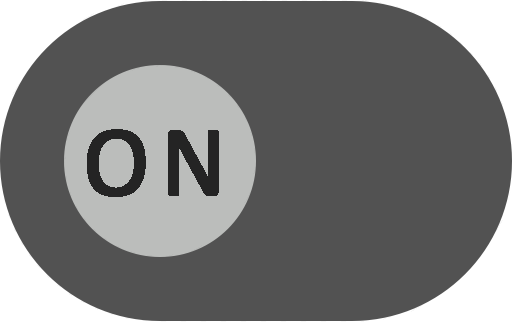
<style>
.page{position:relative;width:512px;height:322px;background:#525252}
.page>*{position:absolute;margin:0}
.t1{font:101px "Calibri";letter-spacing:0.1em;color:#242424;font-weight:bold}
</style>
<div class="page">
<p class="t1" style="left:87px;top:129px;width:132px;height:68px">ON</p>
</div>
